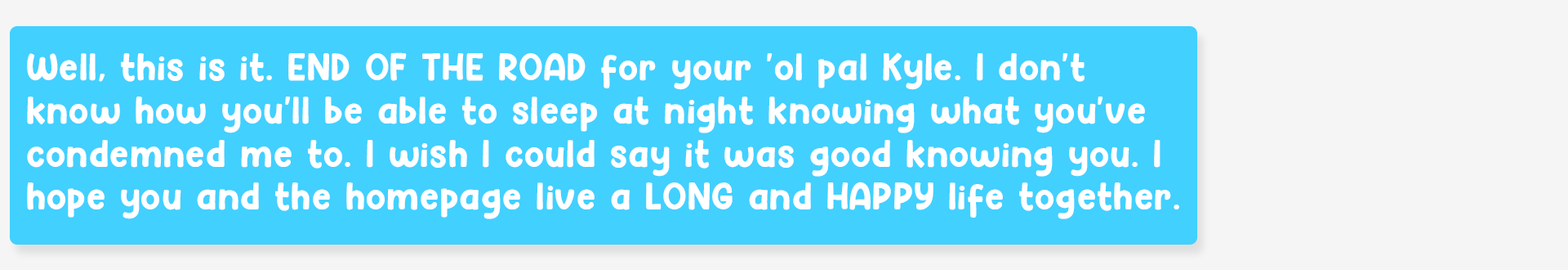
<style>
.page{position:relative;width:1568px;height:270px;background:#42d0ff}
.page>*{position:absolute;margin:0}
.t1{font:35.9px "Hey-Comic";letter-spacing:0.025em;color:#ffffff}
</style>
<div class="page">
<p class="t1" style="left:27px;top:52px;width:1152px;height:167px">Well, this is it. END OF THE ROAD for your 'ol pal Kyle. I don't know how you'll be able to sleep at night knowing what you've condemned me to. I wish I could say it was good knowing you. I hope you and the homepage live a LONG and HAPPY life together.</p>
</div>
